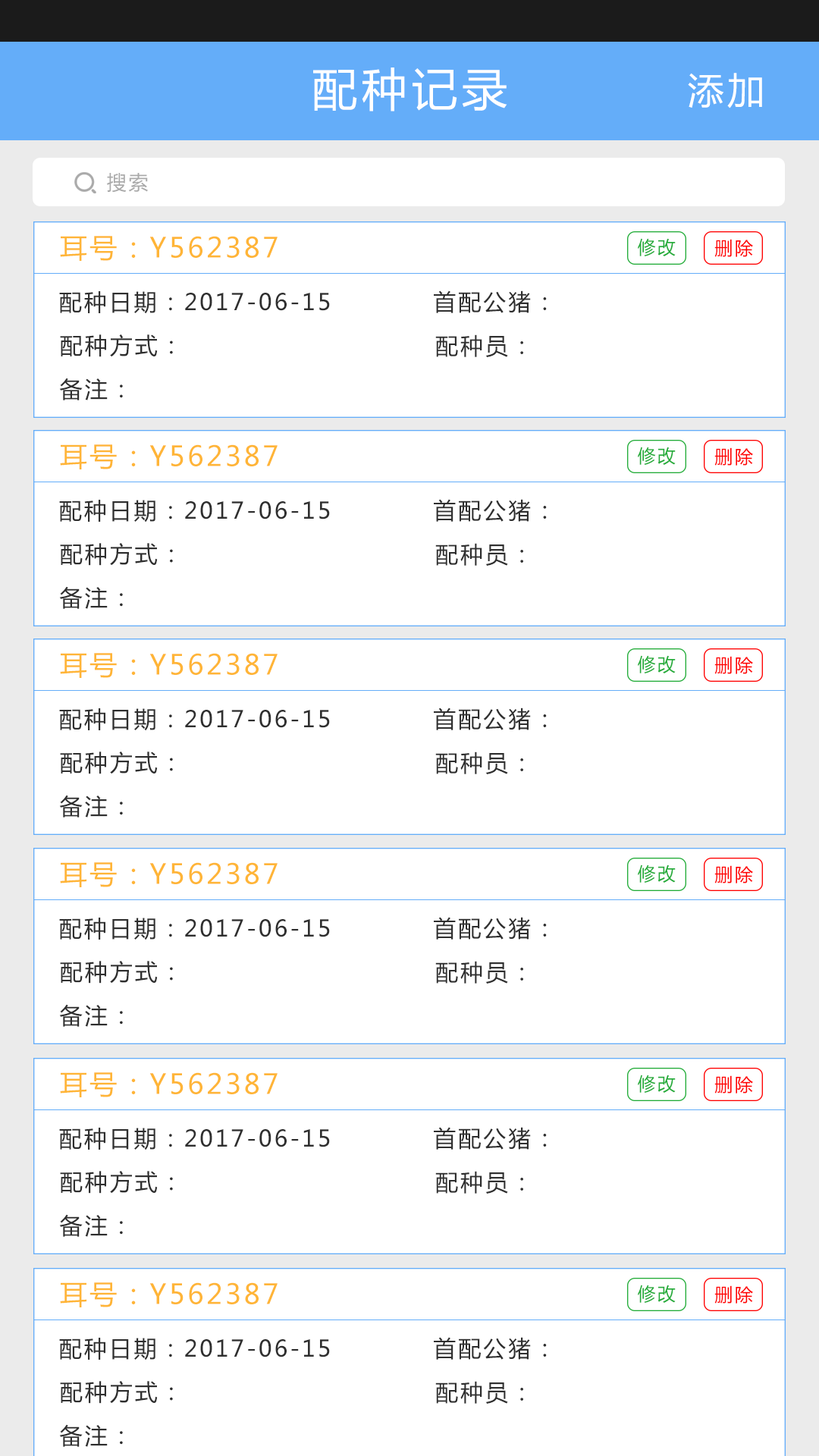
<style>
.page{position:relative;width:819px;height:1456px;background:#ffffff}
.page>*{position:absolute;margin:0}
.t1{font:45.5px "MicrosoftYaHei";letter-spacing:0.1em;color:#ffffff}
.t2{font:36.4px "MicrosoftYaHei";letter-spacing:0.1em;color:#ffffff}
.t3{font:19.7px "MicrosoftYaHei";letter-spacing:0.1em;color:#aaaaaa}
.t4{font:27.3px "MicrosoftYaHei";letter-spacing:0.1em;color:#ffb537}
.t5{font:18.2px "MicrosoftYaHei";letter-spacing:0.1em;color:#22ac38}
.t6{font:18.2px "MicrosoftYaHei";letter-spacing:0.1em;color:#ff0000}
.t7{font:22.7px "MicrosoftYaHei";letter-spacing:0.1em;color:#2f2f2f}
</style>
<div class="page">
<p class="t1" style="left:313px;top:67px;width:194px;height:44px">配种记录</p>
<p class="t2" style="left:688px;top:73px;width:74px;height:35px">添加</p>
<p class="t3" style="left:107px;top:173px;width:41px;height:20px">搜索</p>
<p class="t4" style="left:60px;top:236px;width:218px;height:25px">耳号：Y562387</p>
<p class="t5" style="left:638px;top:238px;width:38px;height:18px">修改</p>
<p class="t6" style="left:714px;top:239px;width:39px;height:18px">删除</p>
<p class="t7" style="left:59px;top:291px;width:271px;height:23px">配种日期：2017-06-15</p>
<p class="t7" style="left:434px;top:290px;width:113px;height:23px">首配公猪：</p>
<p class="t7" style="left:60px;top:334px;width:113px;height:23px">配种方式：</p>
<p class="t7" style="left:435px;top:334px;width:88px;height:23px">配种员：</p>
<p class="t7" style="left:59px;top:378px;width:64px;height:22px">备注：</p>
<p class="t4" style="left:60px;top:444px;width:218px;height:25px">耳号：Y562387</p>
<p class="t5" style="left:638px;top:447px;width:38px;height:18px">修改</p>
<p class="t6" style="left:714px;top:447px;width:39px;height:19px">删除</p>
<p class="t7" style="left:59px;top:500px;width:271px;height:22px">配种日期：2017-06-15</p>
<p class="t7" style="left:434px;top:499px;width:113px;height:23px">首配公猪：</p>
<p class="t7" style="left:60px;top:543px;width:113px;height:23px">配种方式：</p>
<p class="t7" style="left:435px;top:543px;width:88px;height:23px">配种员：</p>
<p class="t7" style="left:59px;top:586px;width:64px;height:23px">备注：</p>
<p class="t4" style="left:60px;top:653px;width:218px;height:25px">耳号：Y562387</p>
<p class="t5" style="left:638px;top:655px;width:38px;height:18px">修改</p>
<p class="t6" style="left:714px;top:656px;width:39px;height:18px">删除</p>
<p class="t7" style="left:59px;top:708px;width:271px;height:23px">配种日期：2017-06-15</p>
<p class="t7" style="left:434px;top:708px;width:113px;height:22px">首配公猪：</p>
<p class="t7" style="left:60px;top:751px;width:113px;height:23px">配种方式：</p>
<p class="t7" style="left:435px;top:751px;width:88px;height:23px">配种员：</p>
<p class="t7" style="left:59px;top:795px;width:64px;height:22px">备注：</p>
<p class="t4" style="left:60px;top:862px;width:218px;height:25px">耳号：Y562387</p>
<p class="t5" style="left:638px;top:864px;width:38px;height:19px">修改</p>
<p class="t6" style="left:714px;top:865px;width:39px;height:18px">删除</p>
<p class="t7" style="left:59px;top:918px;width:271px;height:22px">配种日期：2017-06-15</p>
<p class="t7" style="left:434px;top:917px;width:113px;height:23px">首配公猪：</p>
<p class="t7" style="left:60px;top:961px;width:113px;height:23px">配种方式：</p>
<p class="t7" style="left:435px;top:961px;width:88px;height:23px">配种员：</p>
<p class="t7" style="left:59px;top:1004px;width:64px;height:23px">备注：</p>
<p class="t4" style="left:60px;top:1072px;width:218px;height:25px">耳号：Y562387</p>
<p class="t5" style="left:638px;top:1075px;width:38px;height:18px">修改</p>
<p class="t6" style="left:714px;top:1075px;width:39px;height:19px">删除</p>
<p class="t7" style="left:59px;top:1128px;width:271px;height:22px">配种日期：2017-06-15</p>
<p class="t7" style="left:434px;top:1127px;width:113px;height:23px">首配公猪：</p>
<p class="t7" style="left:60px;top:1171px;width:113px;height:23px">配种方式：</p>
<p class="t7" style="left:435px;top:1171px;width:88px;height:23px">配种员：</p>
<p class="t7" style="left:59px;top:1214px;width:64px;height:23px">备注：</p>
<p class="t4" style="left:60px;top:1282px;width:218px;height:25px">耳号：Y562387</p>
<p class="t5" style="left:638px;top:1285px;width:38px;height:18px">修改</p>
<p class="t6" style="left:714px;top:1285px;width:39px;height:19px">删除</p>
<p class="t7" style="left:59px;top:1338px;width:271px;height:22px">配种日期：2017-06-15</p>
<p class="t7" style="left:434px;top:1337px;width:113px;height:23px">首配公猪：</p>
<p class="t7" style="left:60px;top:1381px;width:113px;height:23px">配种方式：</p>
<p class="t7" style="left:435px;top:1381px;width:88px;height:23px">配种员：</p>
<p class="t7" style="left:59px;top:1424px;width:64px;height:23px">备注：</p>
</div>
